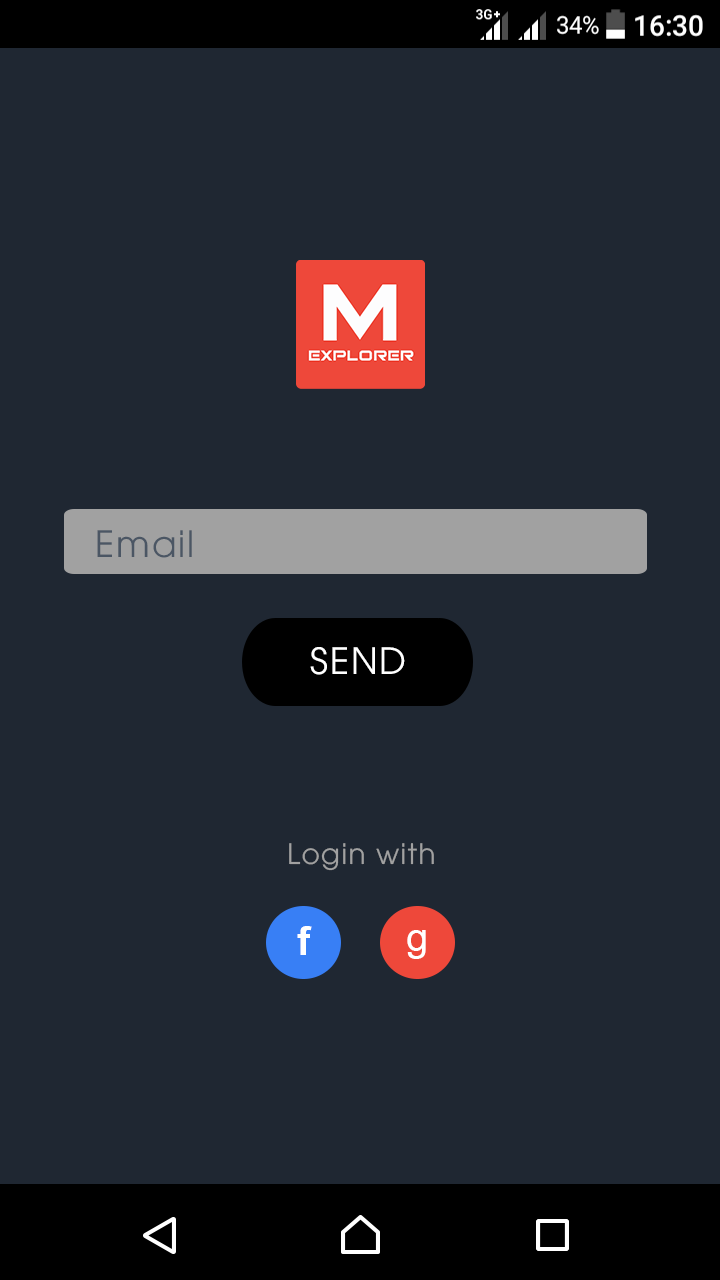
<style>
.page{position:relative;width:720px;height:1280px;background:#1f2732}
.page>*{position:absolute;margin:0}
.t1{font:36px "UTM-Avo";letter-spacing:0.05em;color:#4b5664}
.t2{font:36px "UTM-Avo";letter-spacing:0.05em;color:#ffffff}
.t3{font:28px "UTM-Avo";letter-spacing:0.05em;color:#a1a1a1}
.t4{font:40px "Arial-BoldMT";letter-spacing:0.05em;color:#ffffff}
.t5{font:40px "ArialMT";letter-spacing:0.05em;color:#ffffff}
</style>
<div class="page">
<p class="t1" style="left:97px;top:530px;width:95px;height:28px">Email</p>
<p class="t2" style="left:310px;top:647px;width:95px;height:28px">SEND</p>
<p class="t3" style="left:289px;top:843px;width:145px;height:28px">Login with</p>
<p class="t4" style="left:297px;top:926px;width:15px;height:29px">f</p>
<p class="t5" style="left:407px;top:930px;width:19px;height:29px">g</p>
</div>
